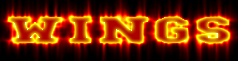
<style>
.page{position:relative;width:238px;height:61px}
.page>*{position:absolute;margin:0}
.t1{font:54px "CollegeBold";letter-spacing:0.01em;font-variant:small-caps;scale:2.02 1}
.t2{font:54px "CollegeBold";letter-spacing:0.01em;font-variant:small-caps;scale:2.08 1}
</style>
<div class="page">
<p class="t1" style="left:9px;top:17px;width:52px;height:26px">w</p>
<p class="t2" style="left:100px;top:17px;width:48px;height:26px">n</p>
<p class="t2" style="left:156px;top:17px;width:32px;height:26px">g</p>
<p class="t2" style="left:197px;top:17px;width:32px;height:26px">s</p>
</div>
